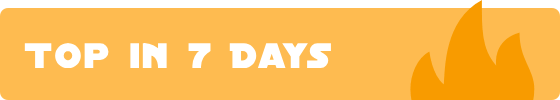
<style>
.page{position:relative;width:560px;height:100px;background:#febb50}
.page>*{position:absolute;margin:0}
.t1{font:38px "DistantGalaxy";letter-spacing:0.05em;color:#ffffff;font-weight:bold}
</style>
<div class="page">
<p class="t1" style="left:24px;top:43px;width:307px;height:25px">Top in 7 Days</p>
</div>
